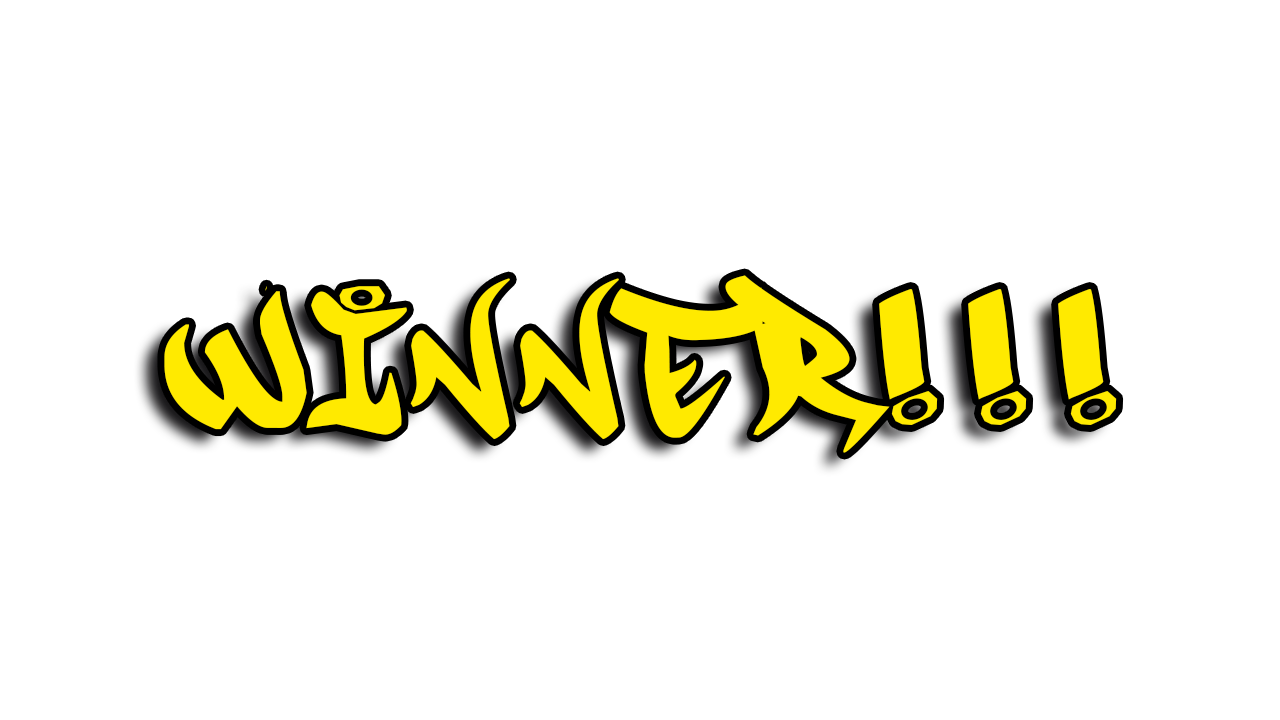
<style>
.page{position:relative;width:1280px;height:720px;background:#ffffff}
.page>*{position:absolute;margin:0}
.t1{font:150px "MESTIZOSUNIDOS-URBANHOOKUPZ";letter-spacing:0.18em;color:#ffea00}
</style>
<div class="page">
<p class="t1" style="left:164px;top:275px;width:953px;height:178px">WINNER!!!</p>
</div>
